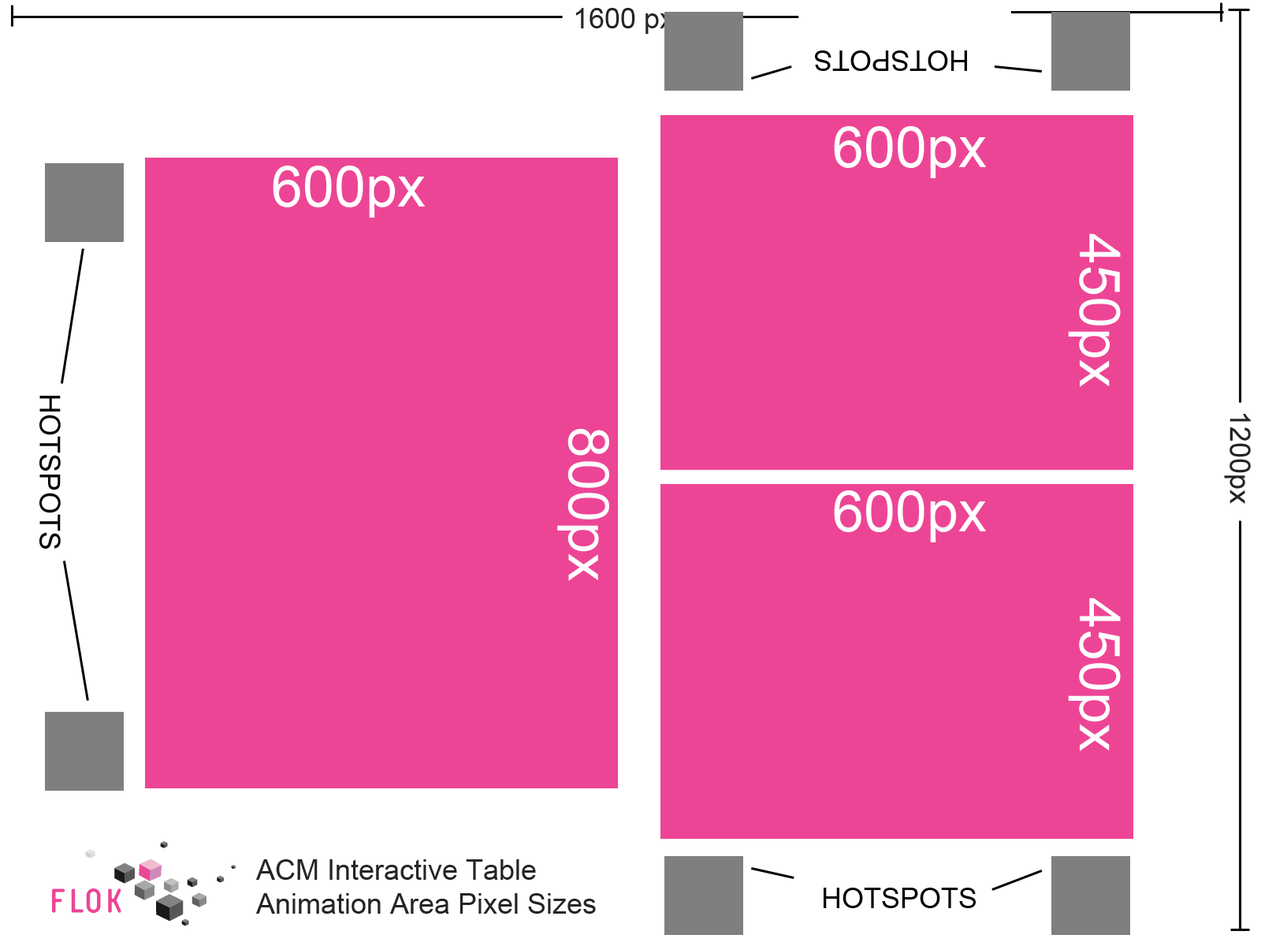
<style>
.page{position:relative;width:1261px;height:946px;background:#ed4595}
.page>*{position:absolute;margin:0}
.t1{font:28.4px "ArialMT";color:#242424}
.t2{font:28.4px "ArialMT";color:#000000}
.t3{font:56.7px "ArialMT";color:#ffffff}
</style>
<div class="page">
<p class="t1" style="left:575px;top:8px;width:99px;height:26px">1600 px</p>
<p class="t2" style="left:815px;top:50px;width:152px;height:21px;rotate:180deg">HOTSPOTS</p>
<p class="t3" style="left:834px;top:126px;width:153px;height:52px">600px</p>
<p class="t3" style="left:273px;top:165px;width:153px;height:53px">600px</p>
<p class="t3" style="left:1068px;top:233px;width:53px;height:154px;rotate:90deg">450px</p>
<p class="t2" style="left:39px;top:396px;width:22px;height:152px;rotate:90deg">HOTSPOTS</p>
<p class="t1" style="left:1224px;top:414px;width:27px;height:90px;rotate:90deg">1200px</p>
<p class="t3" style="left:557px;top:429px;width:52px;height:152px;rotate:90deg">800px</p>
<p class="t3" style="left:834px;top:490px;width:153px;height:52px">600px</p>
<p class="t3" style="left:1068px;top:597px;width:53px;height:154px;rotate:90deg">450px</p>
<p class="t1" style="left:256px;top:859px;width:340px;height:54px">ACM Interactive Table <br>Animation Area Pixel Sizes</p>
<p class="t2" style="left:824px;top:887px;width:152px;height:21px">HOTSPOTS</p>
</div>
